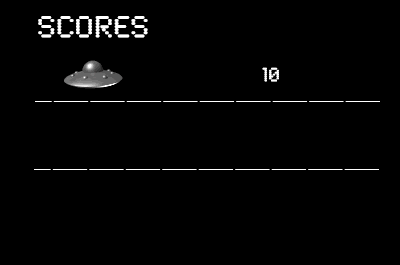
<style>
.page{position:relative;width:400px;height:265px;background:#000000}
.page>*{position:absolute;margin:0}
.t1{font:32px "SynchroLET";color:#ffffff}
.t2{font:20px "SynchroLET";color:#ffffff}
</style>
<div class="page">
<p class="t1" style="left:38px;top:16px;width:110px;height:22px">SCORES</p>
<p class="t2" style="left:262px;top:67px;width:17px;height:15px">10</p>
</div>
